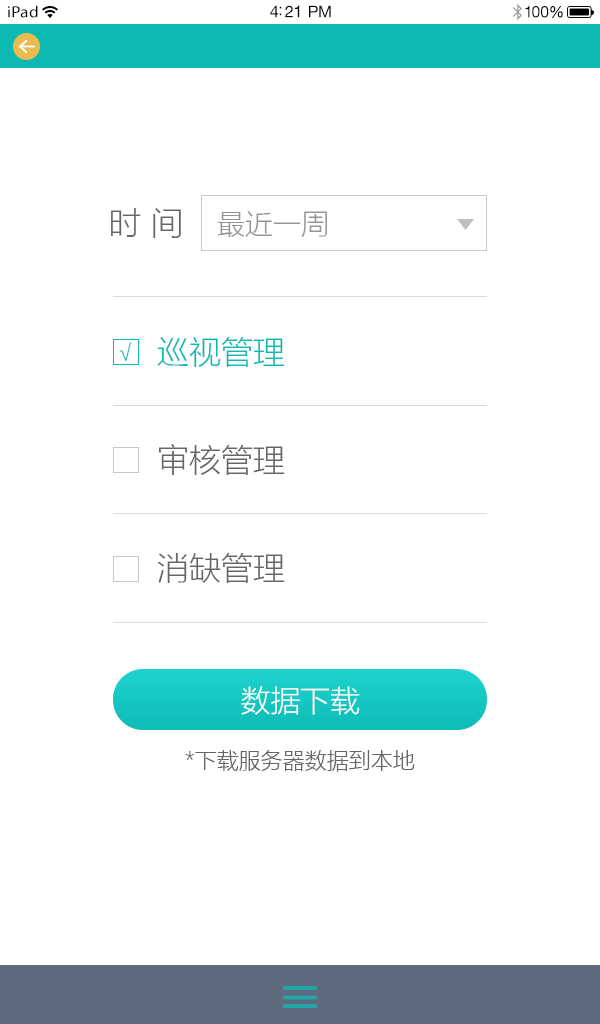
<style>
.page{position:relative;width:600px;height:1024px;background:#ffffff}
.page>*{position:absolute;margin:0}
.t1{font:16.2px "MyriadPro-Regular";letter-spacing:0.02em;color:#000000;scale:1.05 1}
.t2{font:16.3px "HelveticaNeueCE-Roman";letter-spacing:-0.02em;color:#000000}
.t3{font:16.2px "HelveticaNeueCE-Roman";letter-spacing:-0.02em;color:#010101;scale:0.96 1}
.t4{font:32px "MicrosoftYaHeiLight";color:#666666}
.t5{font:28px "MicrosoftYaHeiLight";color:#959595}
.t6{font:23.3px "MicrosoftYaHeiLight";color:#0cb9b3}
.t7{font:32px/100px "MicrosoftYaHeiLight";color:#666666}
.t8{font:32px/100px "MicrosoftYaHeiLight";color:#0cb9b3}
.t9{font:30px "MicrosoftYaHeiLight";color:#ffffff}
.t10{font:22px "MicrosoftYaHeiLight";color:#666666}
</style>
<div class="page">
<p class="t1" style="left:8px;top:5px;width:30px;height:13px">iPad</p>
<p class="t2" style="left:270px;top:5px;width:61px;height:13px">4:21 PM</p>
<p class="t3" style="left:525px;top:5px;width:38px;height:13px">100%</p>
<p class="t4" style="left:111px;top:208px;width:70px;height:30px">时 间</p>
<p class="t5" style="left:217px;top:211px;width:110px;height:26px">最近一周</p>
<p class="t6" style="left:119px;top:342px;width:12px;height:20px">√</p>
<p class="t7" style="left:157px;top:337px;width:128px;height:246px"><span class="t8">巡视管理<br></span>审核管理<br>消缺管理</p>
<p class="t9" style="left:241px;top:686px;width:119px;height:29px">数据下载</p>
<p class="t10" style="left:185px;top:750px;width:230px;height:22px">*下载服务器数据到本地</p>
</div>
